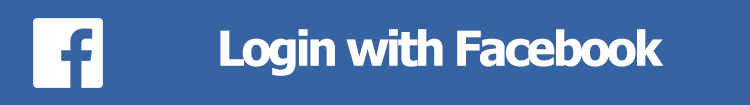
<style>
.page{position:relative;width:750px;height:105px;background:#3664a2}
.page>*{position:absolute;margin:0}
.t1{font:48px "Tahoma-Bold";letter-spacing:-0.06em;color:#ffffff}
</style>
<div class="page">
<p class="t1" style="left:220px;top:29px;width:444px;height:47px">Login with Facebook</p>
</div>
